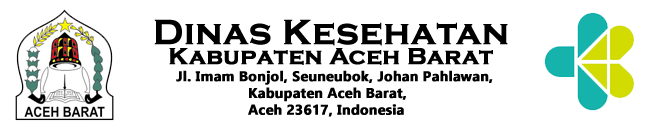
<style>
.page{position:relative;width:660px;height:130px;background:#ffffff}
.page>*{position:absolute;margin:0}
.t1{font:36px "CopperplateGothic-Bold";color:#000000;font-weight:bold}
.t2{font:24px "CopperplateGothic-Bold";color:#000000;font-weight:bold}
.t3{font:14px "Ebrima-Bold";color:#000000;font-weight:bold}
</style>
<div class="page">
<p class="t1" style="left:154px;top:19px;width:354px;height:27px">Dinas Kesehatan</p>
<p class="t2" style="left:169px;top:48px;width:324px;height:17px">Kabupaten Aceh Barat</p>
<p class="t3" style="left:176px;top:70px;width:317px;height:47px">Jl. Imam Bonjol, Seuneubok, Johan Pahlawan, <br>                 Kabupaten Aceh Barat, <br>                 Aceh 23617, Indonesia</p>
</div>
